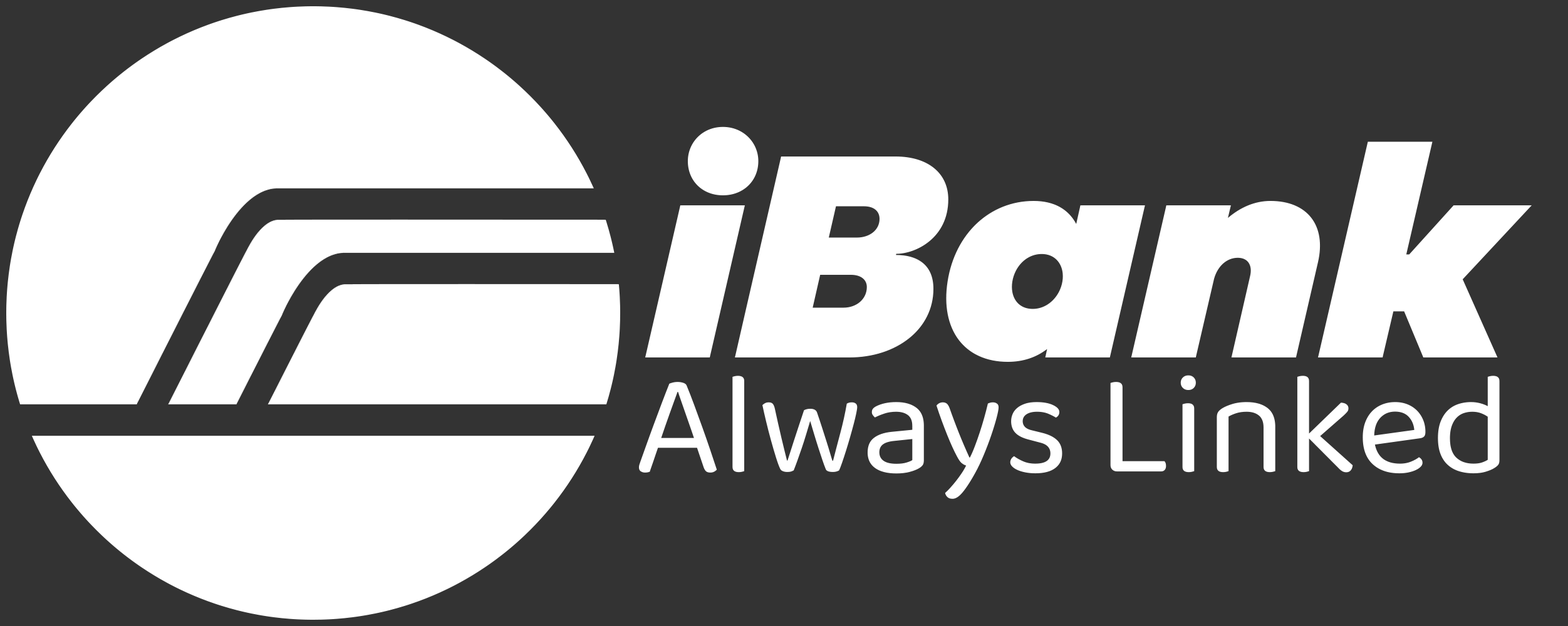
<style>
.page{position:relative;width:1568px;height:626px;background:#333333}
.page>*{position:absolute;margin:0}
.t1{font:300px "GalanoGrotesque-BlackItalic";color:#ffffff}
.t2{font:145.7px "Baloo2-Regular";color:#ffffff}
</style>
<div class="page">
<p class="t1" style="left:645px;top:127px;width:887px;height:235px">iBank</p>
<p class="t2" style="left:638px;top:375px;width:862px;height:124px">Always Linked</p>
</div>
